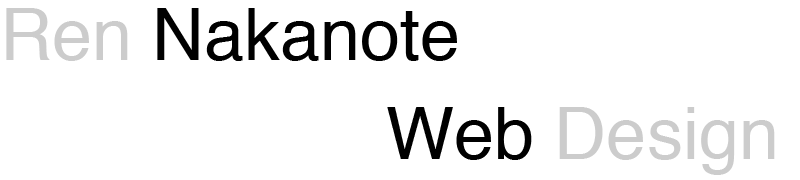
<style>
.page{position:relative;width:800px;height:180px;background:#ffffff}
.page>*{position:absolute;margin:0}
.t1{font:72px "Helvetica";color:#000000}
.t2{font:72px "Helvetica";color:#cccccc}
</style>
<div class="page">
<p class="t1" style="left:6px;top:8px;width:451px;height:53px"><span class="t2">Ren</span> Nakanote</p>
<p class="t2" style="left:387px;top:107px;width:388px;height:68px"><span class="t1">Web </span>Design</p>
</div>
